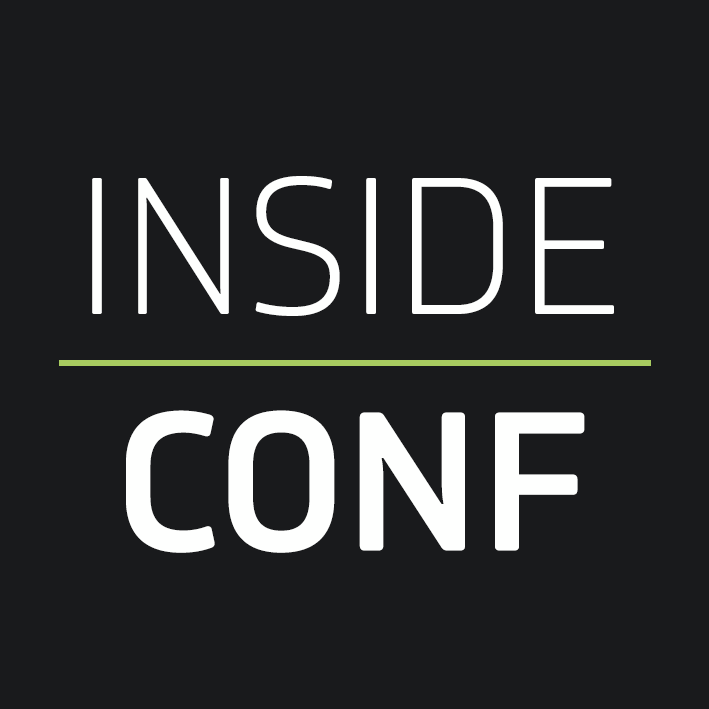
<style>
.page{position:relative;width:709px;height:709px;background:#191a1c}
.page>*{position:absolute;margin:0}
.t1{font:194px "Amfibia-Light";color:#fefffe}
.t2{font:196.9px "Amfibia-DemiBold";color:#fefffe}
</style>
<div class="page">
<p class="t1" style="left:92px;top:176px;width:522px;height:140px">INSIDE</p>
<p class="t2" style="left:126px;top:410px;width:459px;height:143px">CONF</p>
</div>
